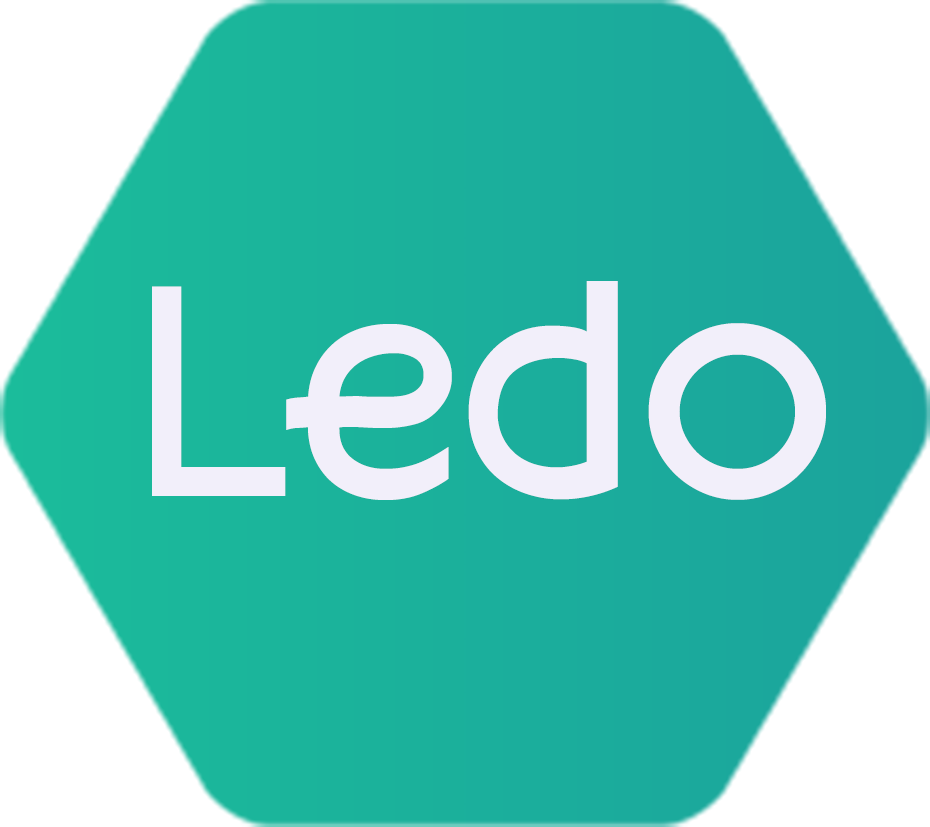
<style>
.page{position:relative;width:930px;height:827px;background:#ffffff}
.page>*{position:absolute;margin:0}
.t1{font:333.3px "Lena";color:#f2effa}
</style>
<div class="page">
<p class="t1" style="left:152px;top:281px;width:674px;height:219px">Ledo</p>
</div>
